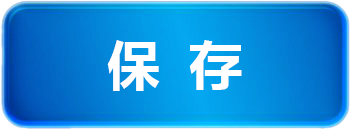
<style>
.page{position:relative;width:350px;height:130px}
.page>*{position:absolute;margin:0}
.t1{font:53px "MicrosoftYaHei";letter-spacing:0.56em;color:#ffffff}
</style>
<div class="page">
<p class="t1" style="left:107px;top:40px;width:135px;height:51px">保存</p>
</div>
